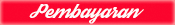
<style>
.page{position:relative;width:175px;height:25px}
.page>*{position:absolute;margin:0}
.t1{font:14.2px "Streetwear";color:#fdfcfc;scale:1.07 1}
</style>
<div class="page">
<p class="t1" style="left:29px;top:4px;width:115px;height:20px">Pembayaran</p>
</div>
